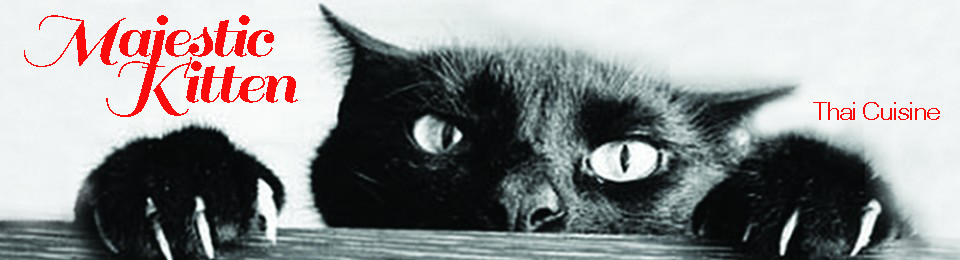
<style>
.page{position:relative;width:960px;height:260px}
.page>*{position:absolute;margin:0}
.t1{font:67px/46px "Sail-Regular";letter-spacing:-0.05em;color:#fb0b0b;scale:1.1 1}
.t2{font:24px "Helvetica-Light";letter-spacing:-0.05em;color:#fb0b0b;scale:1.1 1}
</style>
<div class="page">
<p class="t1" style="left:24px;top:15px;width:274px;height:102px;text-align:right">Majestic  <br>Kitten</p>
<p class="t2" style="left:813px;top:102px;width:127px;height:18px">Thai Cuisine</p>
</div>
